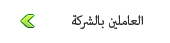
<style>
.page{position:relative;width:170px;height:43px;background:#ffffff}
.page>*{position:absolute;margin:0}
.t1{font:18px "AdobeArabic-Regular";color:#2f2f2f}
</style>
<div class="page">
<p class="t1" style="left:72px;top:15px;width:71px;height:15px">العاملين بالشركة</p>
</div>
